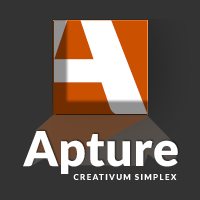
<style>
.page{position:relative;width:200px;height:200px;background:#333333}
.page>*{position:absolute;margin:0}
.t1{font:48px "Lato-Black";color:#ffffff}
.t2{font:8px "Lato-Black";letter-spacing:0.16em;color:#ffffff;text-transform:uppercase}
</style>
<div class="page">
<p class="t1" style="left:23px;top:131px;width:155px;height:43px">Apture</p>
<p class="t2" style="left:73px;top:174px;width:104px;height:6px">creativum simplex</p>
</div>
